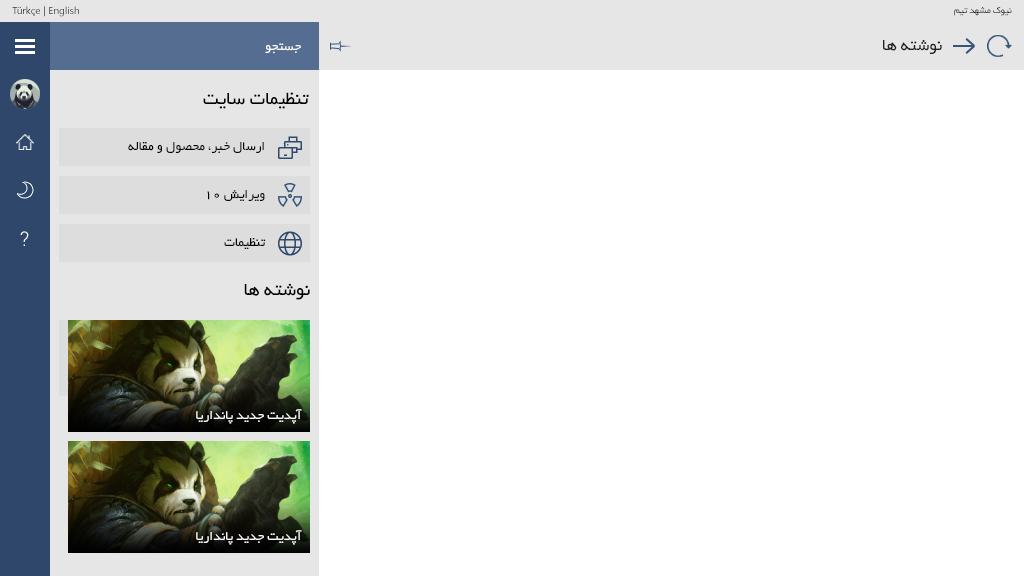
<style>
.page{position:relative;width:1024px;height:576px;background:#ffffff}
.page>*{position:absolute;margin:0}
.t1{font:10px "SegoeUI"}
.t2{font:10px "BYekan";color:#212121}
.t3{font:18px "BYekan";color:#212121}
.t4{font:14px "BYekan"}
.t5{font:14px "BYekan";color:#ffffff}
.t6{font:20px "BYekan";color:#000000}
.t7{font:14px "BYekan";color:#000000}
.t8{font:20px "Roboto-Light";color:#ffffff}
</style>
<div class="page">
<p class="t1" style="left:12px;top:6px;width:67px;height:11px">Türkçe | English</p>
<p class="t2" style="left:954px;top:6px;width:58px;height:10px">نیوک مشهد تیم</p>
<p class="t3" style="left:883px;top:40px;width:59px;height:14px">نوشته ها</p>
<p class="t4" style="left:221px;top:42px;width:80px;height:12px">جستجو تنظیمات</p>
<p class="t5" style="left:265px;top:43px;width:36px;height:11px">جستجو</p>
<p class="t6" style="left:203px;top:92px;width:106px;height:17px">تنظیمات سایت</p>
<p class="t7" style="left:128px;top:142px;width:136px;height:11px">ارسال خبر، محصول و مقاله</p>
<p class="t7" style="left:207px;top:190px;width:58px;height:11px">ویرایش 10</p>
<p class="t8" style="left:20px;top:231px;width:9px;height:15px">?</p>
<p class="t7" style="left:224px;top:238px;width:42px;height:11px">تنظیمات</p>
<p class="t6" style="left:244px;top:283px;width:66px;height:17px">نوشته ها</p>
<p class="t5" style="left:196px;top:409px;width:106px;height:15px">آپدیت جدید پانداریا</p>
<p class="t5" style="left:196px;top:530px;width:106px;height:15px">آپدیت جدید پانداریا</p>
</div>
